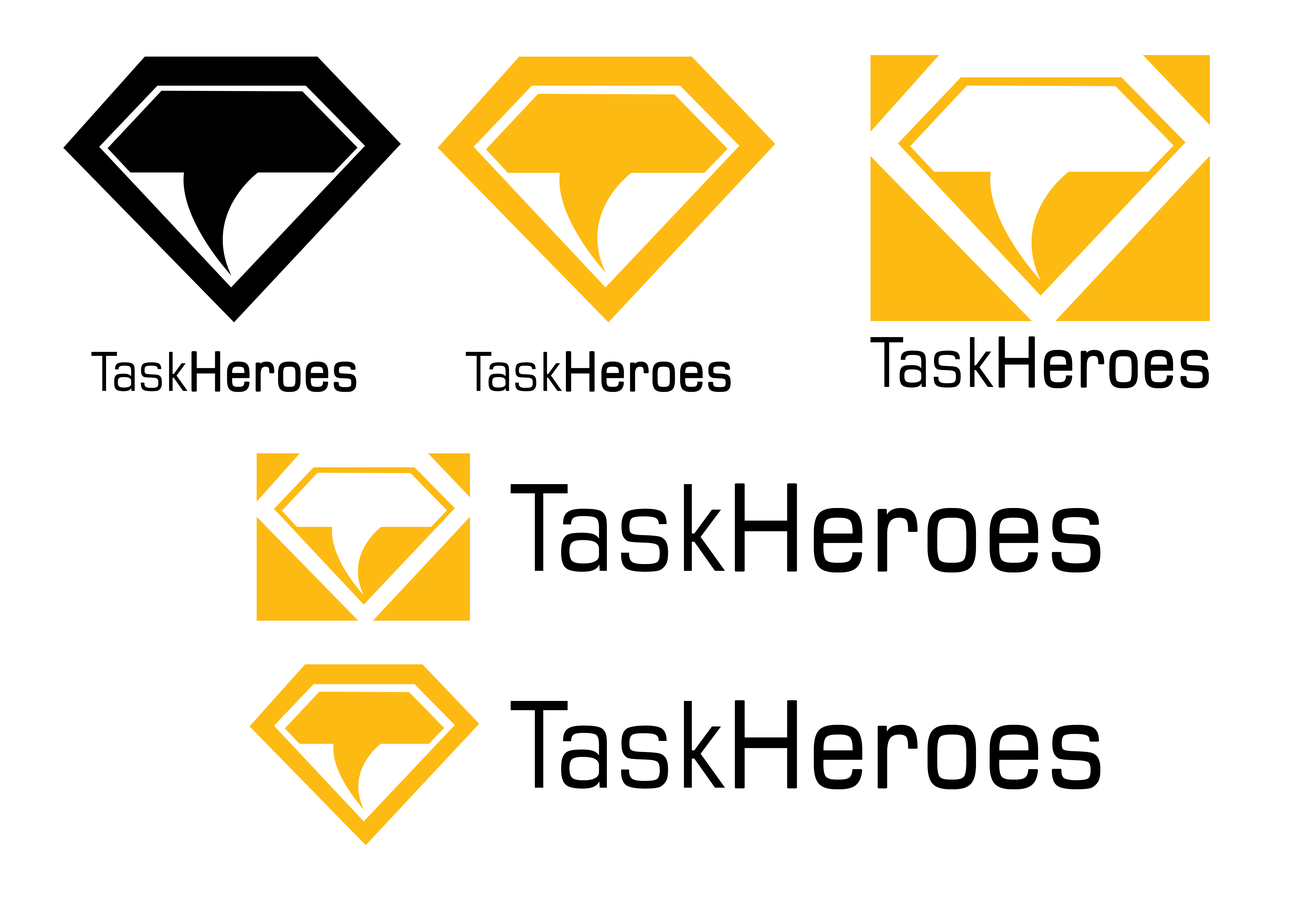
<style>
.page{position:relative;width:1315px;height:907px;background:#ffffff}
.page>*{position:absolute;margin:0}
.t1{font:68.5px "Square721BT-Roman";color:#000000;font-weight:bold;scale:0.88 1}
.t2{font:68.5px "Square721BT-Roman";color:#000000;scale:0.88 1}
.t3{font:53.6px "Square721BT-Roman";color:#000000;font-weight:bold;scale:0.88 1}
.t4{font:53.6px "Square721BT-Roman";color:#000000;scale:0.88 1}
.t5{font:119.2px "Square721BT-Roman";color:#000000;font-weight:bold;scale:0.88 1}
.t6{font:119.2px "Square721BT-Roman";color:#000000;scale:0.88 1}
</style>
<div class="page">
<p class="t1" style="left:870px;top:336px;width:339px;height:52px"><span class="t2">Task</span>Heroes</p>
<p class="t3" style="left:91px;top:351px;width:266px;height:41px"><span class="t4">Task</span>Heroes</p>
<p class="t3" style="left:466px;top:351px;width:265px;height:41px"><span class="t4">Task</span>Heroes</p>
<p class="t5" style="left:511px;top:483px;width:590px;height:89px"><span class="t6">Task</span>Heroes</p>
<p class="t5" style="left:511px;top:700px;width:590px;height:89px"><span class="t6">Task</span>Heroes</p>
</div>
